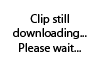
<style>
.page{position:relative;width:100px;height:75px;background:#ffffff}
.page>*{position:absolute;margin:0}
.t1{font:12px "MyriadPro-Regular";color:#000000}
</style>
<div class="page">
<p class="t1" style="left:13px;top:14px;width:74px;height:38px;text-align:center">Clip still <br>downloading...<br>Please wait...</p>
</div>
